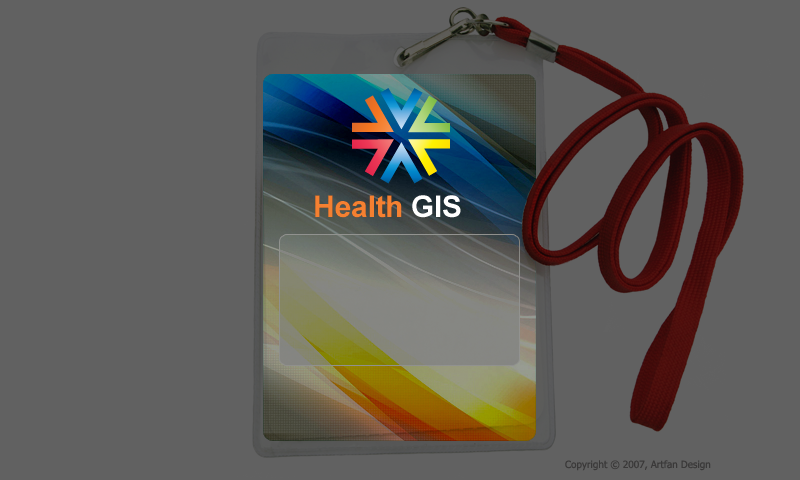
<style>
.page{position:relative;width:800px;height:480px;background:#616161}
.page>*{position:absolute;margin:0}
.t1{font:30px "Arial-BoldMT";letter-spacing:-0.01em;color:#f58031}
.t2{font:30px "Arial-BoldMT";letter-spacing:-0.01em;color:#ffffff}
.t3{font:10px "Tahoma";color:#3a3939}
</style>
<div class="page">
<p class="t1" style="left:315px;top:195px;width:146px;height:23px">Health <span class="t2">GIS</span></p>
<p class="t3" style="left:565px;top:460px;width:146px;height:11px">Copyright © 2007, Artfan Design</p>
</div>
